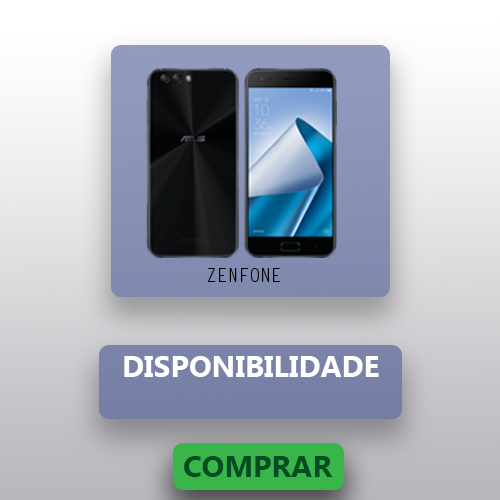
<style>
.page{position:relative;width:500px;height:500px}
.page>*{position:absolute;margin:0}
.t1{font:18px "LetterGothicStd";color:#000000}
.t2{font:30px "MicrosoftTaiLe-Bold";color:#ffffff}
.t3{font:30px "MicrosoftTaiLe-Bold";color:#044d24}
</style>
<div class="page">
<p class="t1" style="left:208px;top:268px;width:72px;height:14px">ZENFONE</p>
<p class="t2" style="left:124px;top:356px;width:255px;height:21px">DISPONIBILIDADE</p>
<p class="t3" style="left:184px;top:456px;width:149px;height:21px">COMPRAR</p>
</div>
